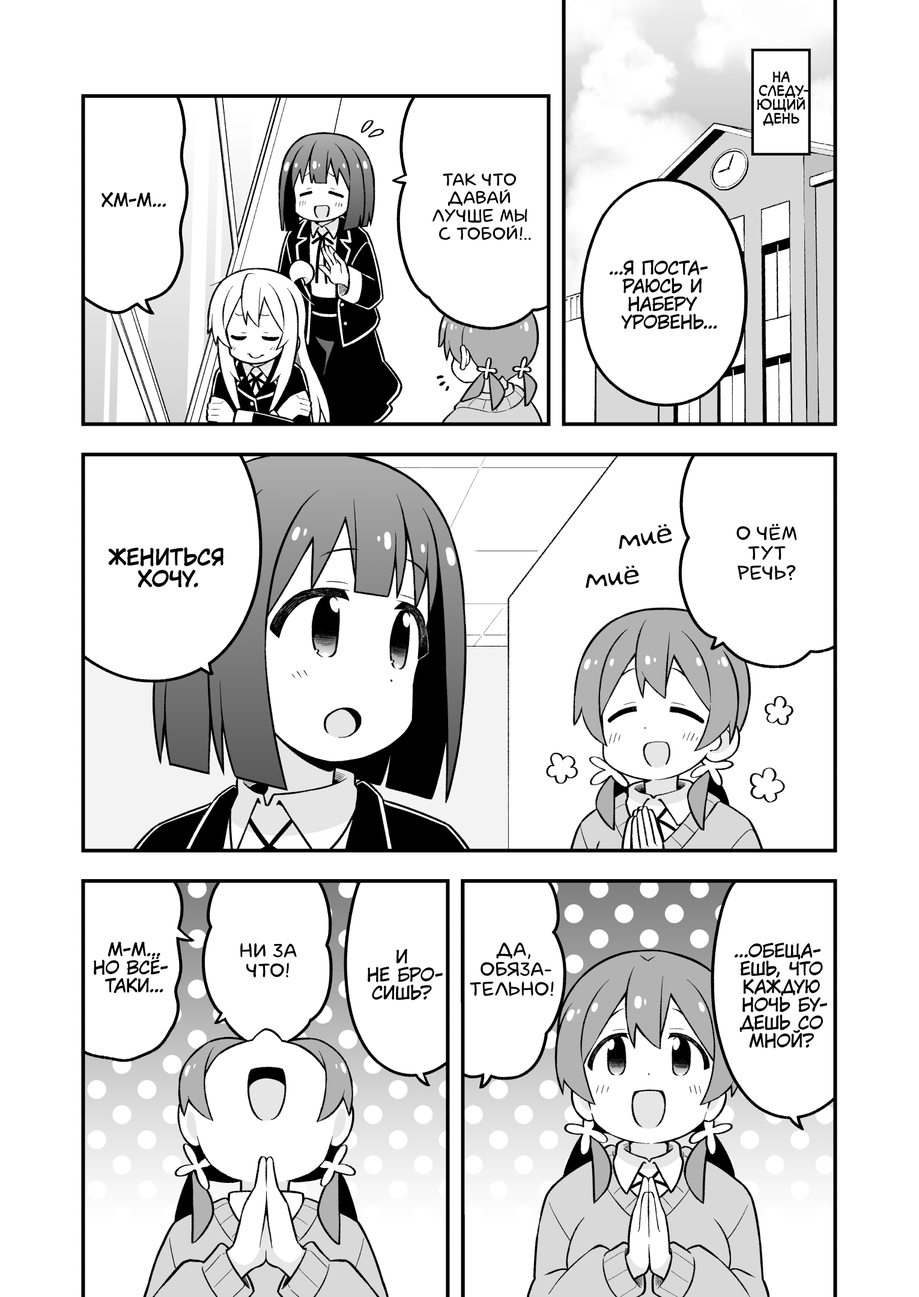
<style>
.page{position:relative;width:919px;height:1297px;background:#ffffff}
.page>*{position:absolute;margin:0}
.t1{font:13.8px "v_CCMonologous";color:#000000;text-transform:uppercase}
.t2{font:18px "laCartoonerie";color:#000000;text-transform:uppercase}
.t3{font:18px "KuraiVoice2";color:#000000;text-transform:uppercase}
.t4{font:28.8px "v_Augie";color:#000000}
.t5{font:19.8px "laCartoonerie";color:#000000;text-transform:uppercase}
.t6{font:21.6px "KuraiVoice2";color:#000000;text-transform:uppercase;font-weight:bold}
</style>
<div class="page">
<p class="t1" style="left:757px;top:71px;width:52px;height:55px;text-align:center">На<br>следу-<br>ющий<br>день</p>
<p class="t2" style="left:432px;top:173px;width:99px;height:67px;text-align:center">Так что<br>давай<br>лучше мы<br>с тобой!..</p>
<p class="t3" style="left:102px;top:192px;width:64px;height:15px">Хм-м...</p>
<p class="t3" style="left:610px;top:259px;width:107px;height:71px;text-align:center">...Я поста-<br>раюсь и<br>наберу<br>уровень...</p>
<p class="t4" style="left:619px;top:524px;width:53px;height:26px;rotate:-9deg">миё</p>
<p class="t5" style="left:736px;top:524px;width:61px;height:56px;text-align:center">О чём<br>тут<br>речь?</p>
<p class="t6" style="left:108px;top:547px;width:115px;height:41px;text-align:center">Жениться<br>хочу.</p>
<p class="t4" style="left:586px;top:565px;width:53px;height:24px;rotate:-6deg">миё</p>
<p class="t3" style="left:94px;top:942px;width:74px;height:52px;text-align:center">М-м...<br>Но всё-<br>таки...</p>
<p class="t5" style="left:240px;top:943px;width:57px;height:35px;text-align:center">Ни за<br>что!</p>
<p class="t3" style="left:368px;top:949px;width:75px;height:52px;text-align:center">И<br>не бро-<br>сишь?</p>
<p class="t5" style="left:470px;top:942px;width:84px;height:55px;text-align:center">Да,<br>обяза-<br>тельно!</p>
<p class="t3" style="left:735px;top:943px;width:92px;height:106px;text-align:center">...Обеща-<br>ешь, что<br>каждую<br>ночь бу-<br>дешь со<br>мной?</p>
</div>
